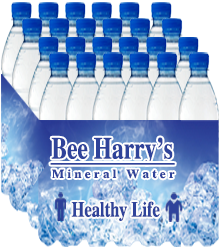
<style>
.page{position:relative;width:220px;height:250px}
.page>*{position:absolute;margin:0}
.t1{font:30.4px "STIXGeneral-Bold";color:#2f439a;scale:0.77 1}
.t2{font:29px "STIXGeneral-Bold";color:#2f439a;scale:0.78 1}
.t3{font:12.4px "STIXGeneral-Bold";color:#2f439a;scale:1.05 1}
.t4{font:21.5px "STIXGeneral-Bold";color:#2f439a;scale:0.77 1}
</style>
<div class="page">
<p class="t1" style="left:51px;top:137px;width:122px;height:28px">Bee Harry’s</p>
<p class="t2" style="left:50px;top:163px;width:125px;height:2px">___________</p>
<p class="t3" style="left:52px;top:169px;width:123px;height:10px">M i n e r a l   W a t e r</p>
<p class="t4" style="left:71px;top:201px;width:89px;height:20px">Healthy Life</p>
</div>
